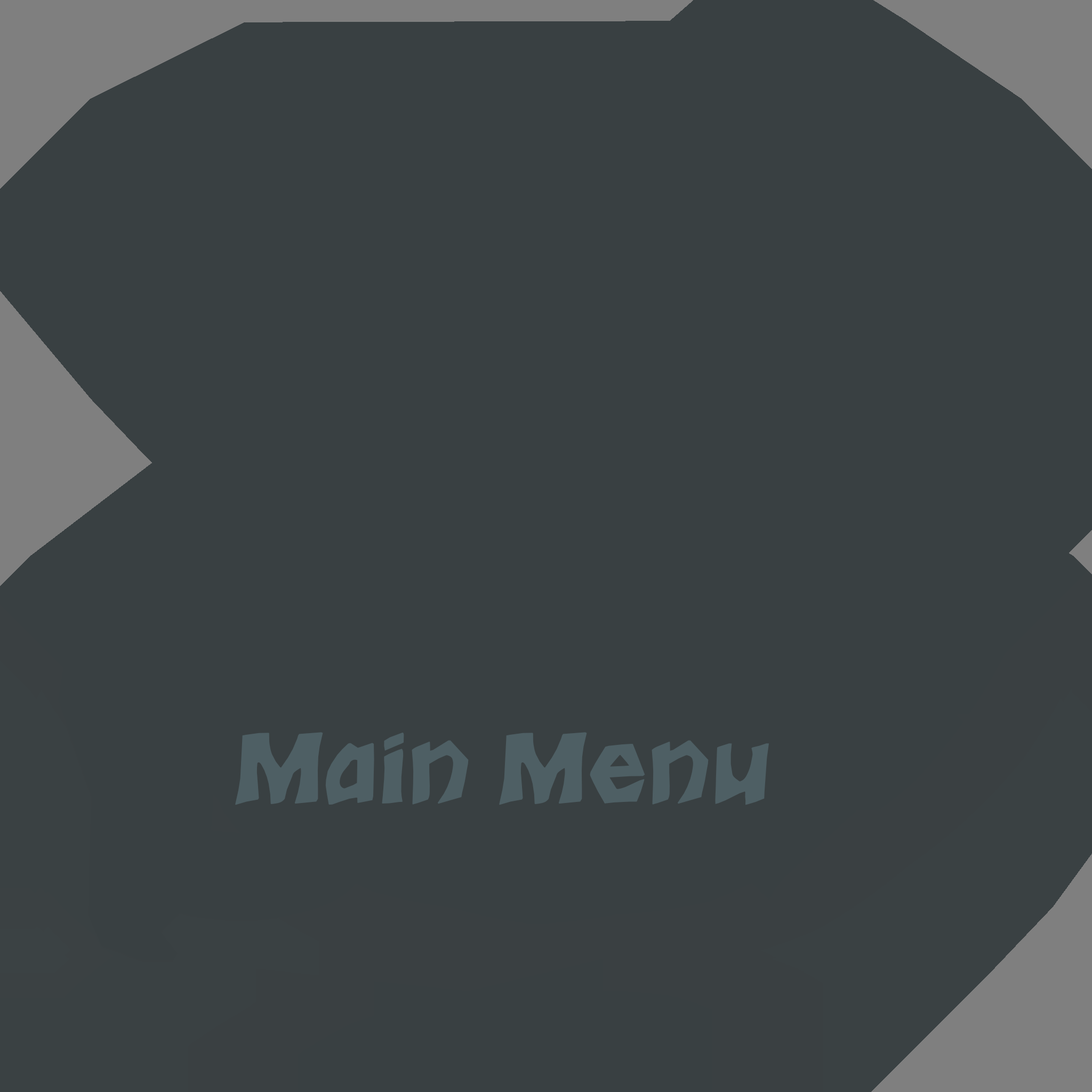
<style>
.page{position:relative;width:1092px;height:1092px;background:#394042}
.page>*{position:absolute;margin:0}
.t1{font:93.3px "Tarzan";color:#4e5f64}
</style>
<div class="page">
<p class="t1" style="left:235px;top:732px;width:534px;height:73px">Main Menu</p>
</div>
